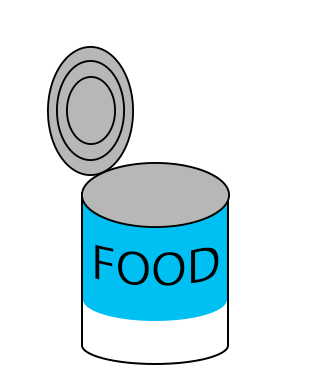
<style>
.page{position:relative;width:312px;height:390px;background:#ffffff}
.page>*{position:absolute;margin:0}
.t1{font:50px "MyriadPro-Regular";color:#030000}
</style>
<div class="page">
<p class="t1" style="left:95px;top:244px;width:124px;height:42px">FOOD</p>
</div>
